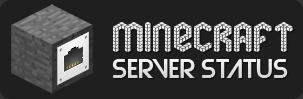
<style>
.page{position:relative;width:303px;height:99px;background:#1f1f1f}
.page>*{position:absolute;margin:0}
.t1{font:55px "soma";color:#ffffff}
.t2{font:24px "Strasua-Regular";color:#e5e5e5}
</style>
<div class="page">
<p class="t1" style="left:113px;top:22px;width:180px;height:30px">minecraft</p>
<p class="t2" style="left:112px;top:59px;width:176px;height:19px">server status</p>
</div>
